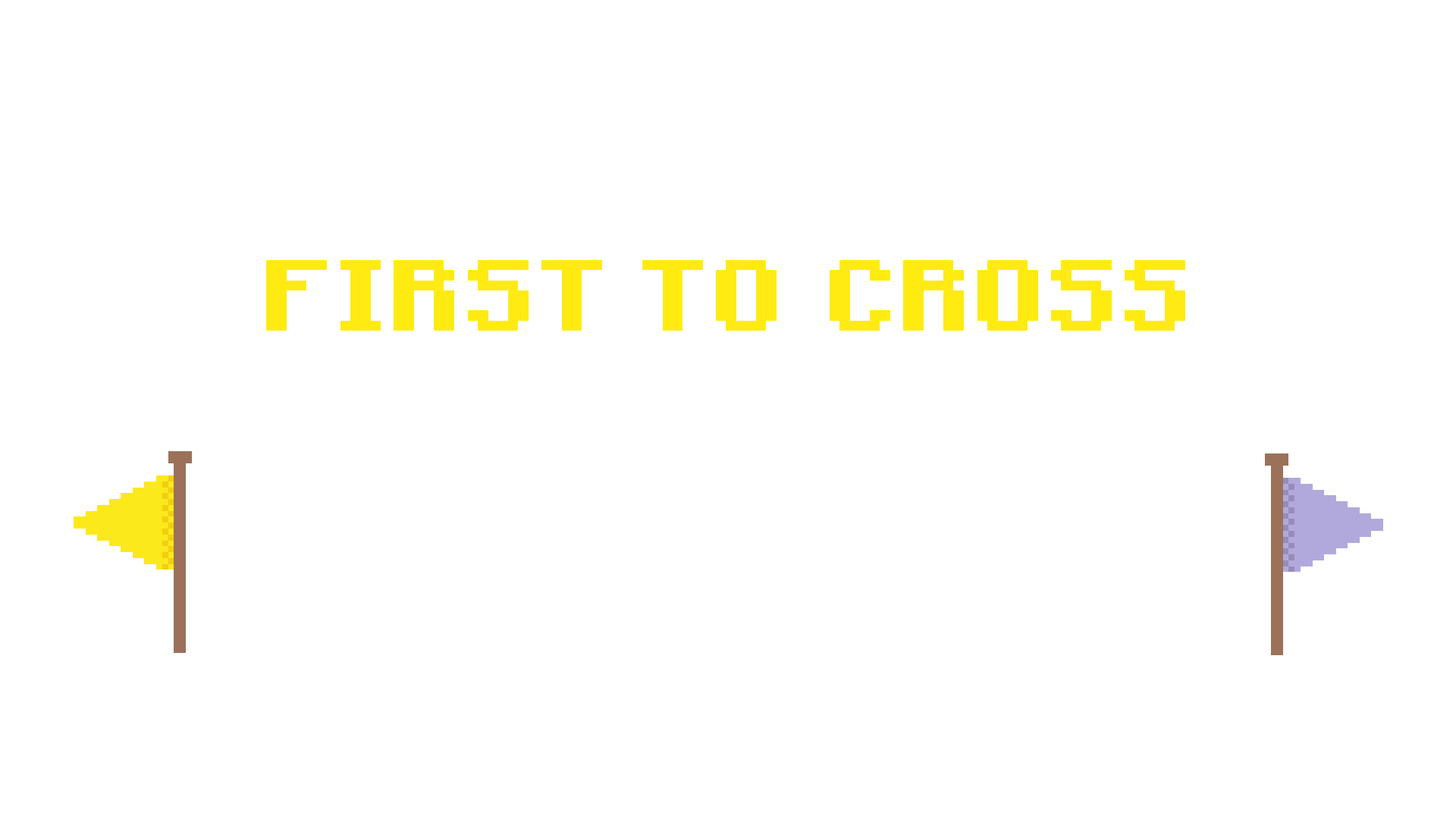
<style>
.page{position:relative;width:1456px;height:819px;background:#ffffff}
.page>*{position:absolute;margin:0}
.t1{font:80.5px "Mojang-Bold";letter-spacing:0.01em;color:#ffeb12}
</style>
<div class="page">
<p class="t1" style="left:266px;top:260px;width:919px;height:71px">FIRST  TO   CROSS</p>
</div>
